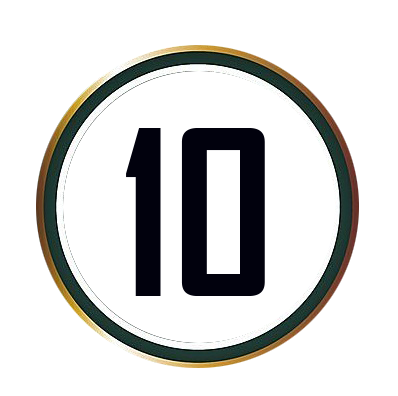
<style>
.page{position:relative;width:398px;height:396px;background:#ffffff}
.page>*{position:absolute;margin:0}
.t1{font:220.1px "AgencyFB-Bold";color:#01010d}
</style>
<div class="page">
<p class="t1" style="left:126px;top:128px;width:139px;height:168px">10</p>
</div>
